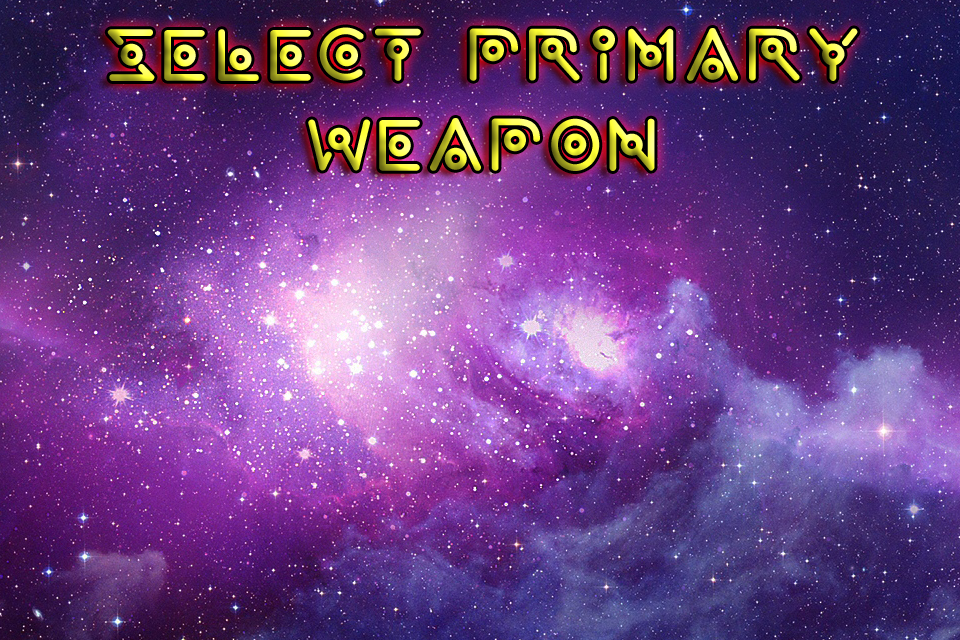
<style>
.page{position:relative;width:960px;height:640px}
.page>*{position:absolute;margin:0}
.t1{font:75px "wearealien!!"}
</style>
<div class="page">
<p class="t1" style="left:107px;top:27px;width:751px;height:144px;text-align:center">select primary<br>weapon</p>
</div>
